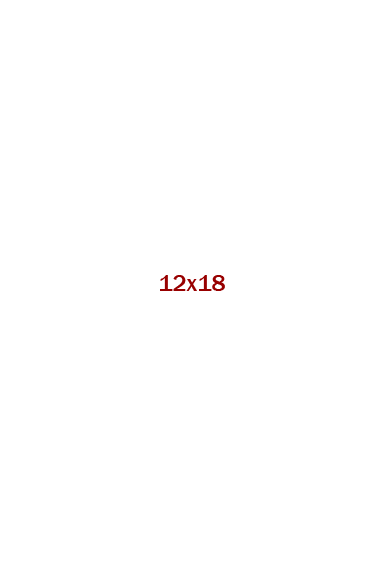
<style>
.page{position:relative;width:384px;height:576px;background:#ffffff}
.page>*{position:absolute;margin:0}
.t1{font:24px "FranklinGothic-Medium";color:#980000}
</style>
<div class="page">
<p class="t1" style="left:160px;top:275px;width:65px;height:16px">12x18</p>
</div>
